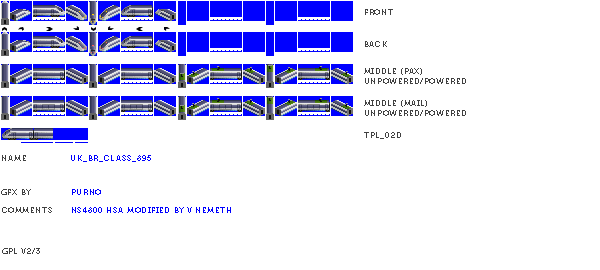
<style>
.page{position:relative;width:600px;height:270px;background:#ffffff}
.page>*{position:absolute;margin:0}
.t1{font:8px "Museo700-Regular";letter-spacing:0.075em;color:#404040;text-transform:uppercase}
.t2{font:8px "Museo700-Regular";letter-spacing:0.075em;color:#0000ff;text-transform:uppercase}
</style>
<div class="page">
<p class="t1" style="left:365px;top:9px;width:28px;height:6px">front</p>
<p class="t1" style="left:365px;top:41px;width:22px;height:6px">back</p>
<p class="t1" style="left:364px;top:68px;width:102px;height:16px">middle (pax)<br>unpowered/powered</p>
<p class="t1" style="left:364px;top:100px;width:102px;height:16px">middle (mail)<br>unpowered/powered</p>
<p class="t1" style="left:364px;top:132px;width:37px;height:7px">tpl_02d</p>
<p class="t1" style="left:2px;top:155px;width:24px;height:6px">name</p>
<p class="t2" style="left:71px;top:155px;width:80px;height:7px">UK_BR_Class_895</p>
<p class="t1" style="left:1px;top:189px;width:30px;height:6px">gfx by</p>
<p class="t2" style="left:72px;top:189px;width:29px;height:6px">purno</p>
<p class="t1" style="left:2px;top:207px;width:50px;height:6px">comments</p>
<p class="t2" style="left:72px;top:207px;width:159px;height:6px">ns4800 hsa modified by v nemeth</p>
<p class="t1" style="left:2px;top:248px;width:38px;height:6px">gpl v2/3</p>
</div>
